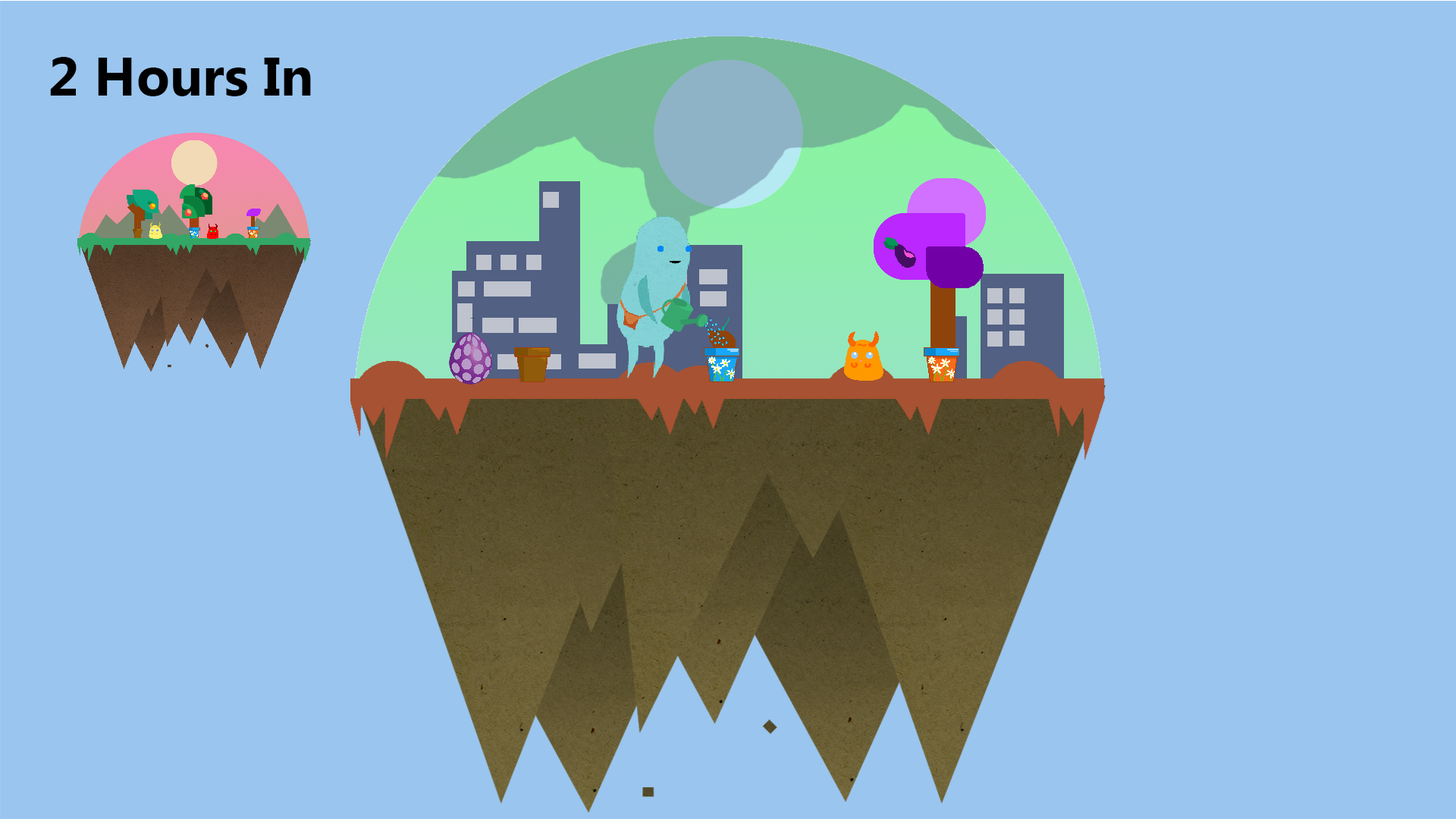
<style>
.page{position:relative;width:1456px;height:819px;background:#9ac5ee}
.page>*{position:absolute;margin:0}
.t1{font:54.6px "MyanmarText-Bold";color:#000000}
</style>
<div class="page">
<p class="t1" style="left:50px;top:57px;width:261px;height:39px">2 Hours In</p>
</div>
